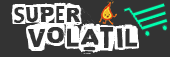
<style>
.page{position:relative;width:170px;height:57px;background:#333333}
.page>*{position:absolute;margin:0}
.t1{font:24px "CFGreenCorn-Regular";color:#ffffff}
.t2{font:30px "CFGreenCorn-Regular";color:#ffffff}
</style>
<div class="page">
<p class="t1" style="left:11px;top:2px;width:71px;height:23px">SUPER</p>
<p class="t2" style="left:26px;top:23px;width:113px;height:31px">VOLATIL</p>
</div>
